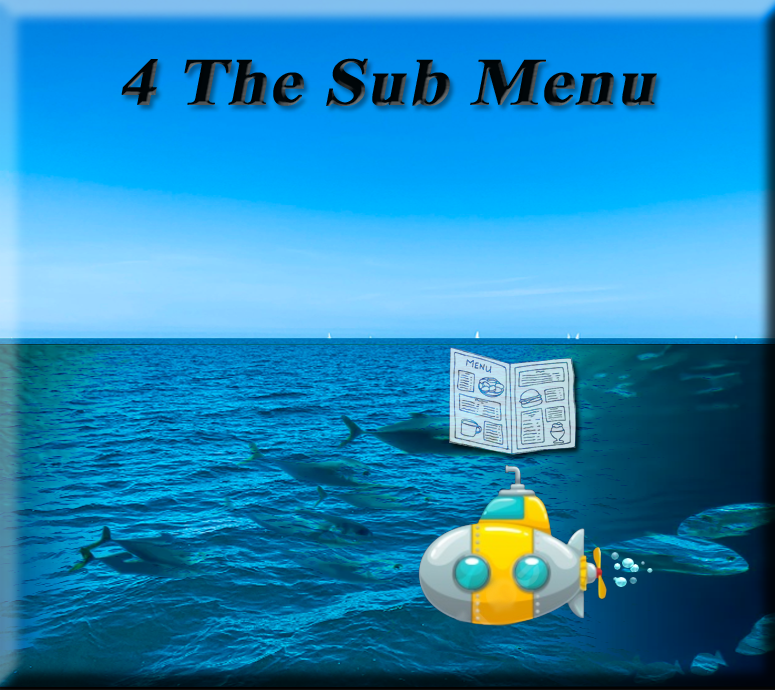
<style>
.page{position:relative;width:775px;height:690px}
.page>*{position:absolute;margin:0}
.t1{font:67px "TimesNewRomanPS-BoldMT";color:#000609;font-weight:bold;font-style:italic;scale:1.08 1}
</style>
<div class="page">
<p class="t1" style="left:121px;top:58px;width:536px;height:48px">4 The Sub Menu</p>
</div>
